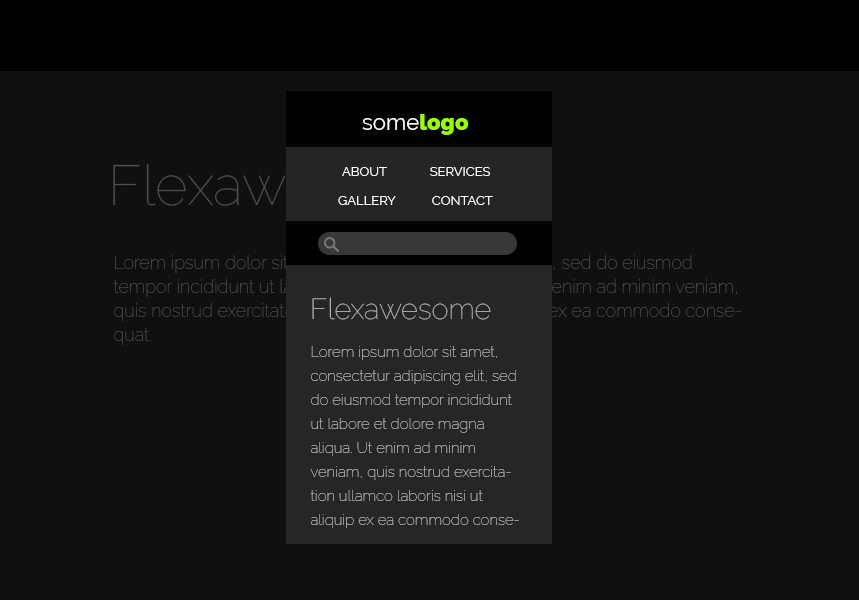
<style>
.page{position:relative;width:859px;height:600px;background:#101010}
.page>*{position:absolute;margin:0}
.t1{font:22.1px "Raleway-Regular";color:#ffffff}
.t2{font:22.1px "Raleway-Black";color:#96ff00}
.t3{font:13px "Raleway-Regular";color:#ffffff}
.t4{font:28.9px "Raleway-Thin";color:#b2b2b2}
.t5{font:15px/24px "Raleway-Thin";color:#b2b2b2}
</style>
<div class="page">
<p class="t1" style="left:362px;top:114px;width:107px;height:21px">some<span class="t2">logo</span></p>
<p class="t3" style="left:342px;top:167px;width:149px;height:9px">ABOUT             SERVICES</p>
<p class="t3" style="left:338px;top:196px;width:155px;height:9px">GALLERY           CONTACT</p>
<p class="t4" style="left:312px;top:297px;width:179px;height:23px">Flexawesome</p>
<p class="t5" style="left:310px;top:346px;width:209px;height:182px">Lorem ipsum dolor sit amet, consectetur adipiscing elit, sed do eiusmod tempor incididunt ut labore et dolore magna aliqua. Ut enim ad minim veniam, quis nostrud exercitation ullamco laboris nisi ut aliquip ex ea commodo consequat.</p>
</div>
